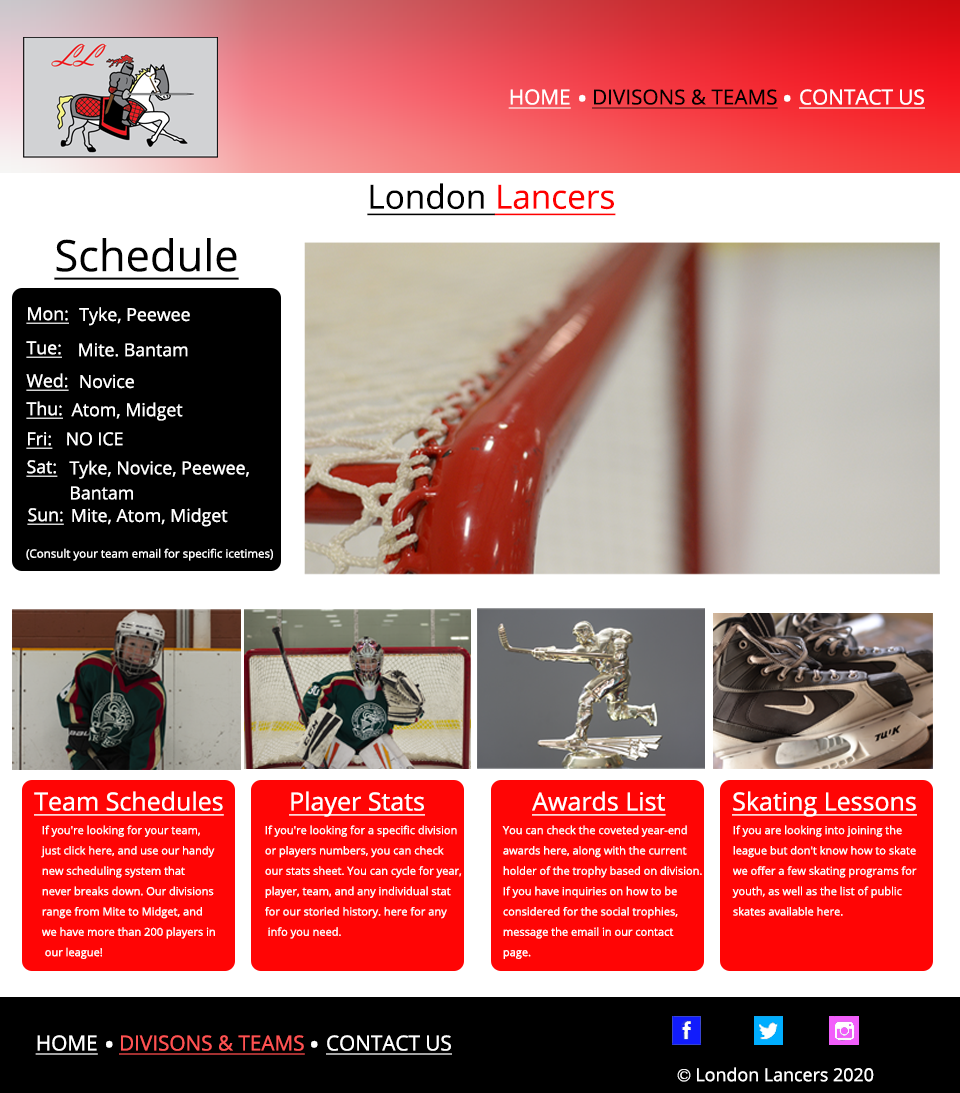
<style>
.page{position:relative;width:960px;height:1093px}
.page>*{position:absolute;margin:0}
.t1{font:20.7px "OpenSans";color:#000000;text-decoration:underline}
.t2{font:20.7px "OpenSans";color:#ffffff;text-decoration:underline}
.t3{font:51.3px "OpenSans";color:#ffffff}
.t4{font:33.3px "OpenSans";color:#fe0000;text-decoration:underline}
.t5{font:33.3px "OpenSans";color:#000000;text-decoration:underline}
.t6{font:43.5px "OpenSans";color:#000000;text-decoration:underline}
.t7{font:17.7px "OpenSans";color:#ffffff;text-decoration:underline}
.t8{font:17.8px "OpenSans";color:#ffffff}
.t9{font:17.7px "OpenSans";color:#ffffff}
.t10{font:17.7px/25px "OpenSans";color:#ffffff}
.t11{font:11.5px "OpenSans";color:#ffffff}
.t12{font:25px "OpenSans";color:#ffffff;text-decoration:underline}
.t13{font:11.1px/20.3px "OpenSans";color:#ffffff}
.t14{font:20.7px "OpenSans";color:#ff5252;text-decoration:underline}
.t15{font:17.9px "OpenSans";color:#ffffff}
.t16{font:17.9px "GoudyOldStyleT-Regular";color:#ffffff}
</style>
<div class="page">
<p class="t1" style="left:508px;top:89px;width:417px;height:20px"><span class="t2">HOME    </span>DIVISONS &amp; TEAMS    <span class="t2">CONTACT US</span></p>
<p class="t3" style="left:579px;top:94px;width:7px;height:8px">.</p>
<p class="t3" style="left:784px;top:94px;width:7px;height:8px">.</p>
<p class="t4" style="left:367px;top:183px;width:249px;height:33px"><span class="t5">London </span>Lancers</p>
<p class="t6" style="left:54px;top:238px;width:185px;height:42px">Schedule</p>
<p class="t7" style="left:26px;top:307px;width:43px;height:17px">Mon:</p>
<p class="t8" style="left:79px;top:307px;width:111px;height:19px">Tyke, Peewee</p>
<p class="t7" style="left:26px;top:341px;width:36px;height:17px">Tue:</p>
<p class="t9" style="left:79px;top:343px;width:109px;height:14px">Mite. Bantam</p>
<p class="t7" style="left:26px;top:373px;width:43px;height:18px">Wed:</p>
<p class="t9" style="left:80px;top:374px;width:54px;height:15px">Novice</p>
<p class="t7" style="left:26px;top:401px;width:37px;height:18px">Thu:</p>
<p class="t9" style="left:71px;top:402px;width:112px;height:19px">Atom, Midget</p>
<p class="t7" style="left:26px;top:432px;width:27px;height:17px">Fri:</p>
<p class="t9" style="left:67px;top:432px;width:56px;height:14px">NO ICE</p>
<p class="t7" style="left:26px;top:460px;width:32px;height:17px">Sat:</p>
<p class="t10" style="left:69px;top:460px;width:180px;height:40px">Tyke, Novice, Peewee, <br>Bantam</p>
<p class="t7" style="left:27px;top:508px;width:37px;height:17px">Sun:</p>
<p class="t9" style="left:72px;top:508px;width:156px;height:19px">Mite, Atom, Midget</p>
<p class="t11" style="left:26px;top:548px;width:247px;height:13px">(Consult your team email for specific icetimes)</p>
<p class="t12" style="left:34px;top:791px;width:190px;height:25px">Team Schedules</p>
<p class="t12" style="left:289px;top:791px;width:136px;height:26px">Player Stats</p>
<p class="t12" style="left:532px;top:791px;width:134px;height:25px">Awards List</p>
<p class="t12" style="left:732px;top:791px;width:185px;height:26px">Skating Lessons</p>
<p class="t13" style="left:41px;top:825px;width:174px;height:134px">If you're looking for your team, <br>just click here, and use our handy<br>new scheduling system that <br>never breaks down. Our divisions<br>range from Mite to Midget, and <br>we have more than 200 players in<br> our league!</p>
<p class="t13" style="left:265px;top:825px;width:197px;height:114px">If you're looking for a specific division<br>or players numbers, you can check <br>our stats sheet. You can cycle for year,<br>player, team, and any individual stat <br>for our storied history. here for any<br> info you need.</p>
<p class="t13" style="left:502px;top:825px;width:200px;height:134px">You can check the coveted year-end <br>awards here, along with the current <br>holder of the trophy based on division.<br>If you have inquiries on how to be <br>considered for the social trophies, <br>message the email in our contact <br>page.</p>
<p class="t13" style="left:732px;top:825px;width:185px;height:91px">If you are looking into joining the <br>league but don't know how to skate <br>we offer a few skating programs for <br>youth, as well as the list of public <br>skates available here.</p>
<p class="t14" style="left:35px;top:1035px;width:417px;height:20px"><span class="t2">HOME    </span>DIVISONS &amp; TEAMS    <span class="t2">CONTACT US</span></p>
<p class="t3" style="left:106px;top:1040px;width:7px;height:8px">.</p>
<p class="t3" style="left:311px;top:1040px;width:7px;height:8px">.</p>
<p class="t15" style="left:677px;top:1067px;width:197px;height:15px"><span class="t16">©</span> London Lancers 2020</p>
</div>
